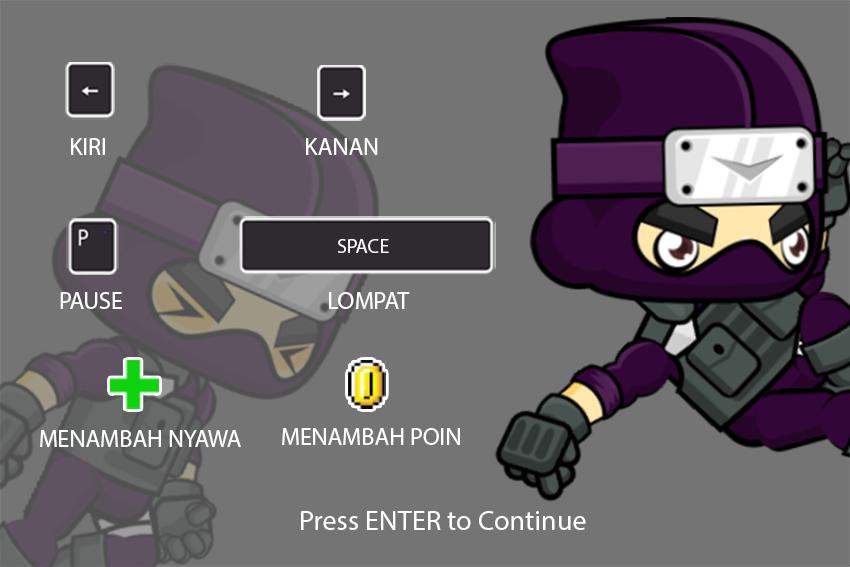
<style>
.page{position:relative;width:850px;height:567px;background:#747474}
.page>*{position:absolute;margin:0}
.t1{font:24.1px "MyriadPro-Regular";color:#ffffff}
.t2{font:20px "MyriadPro-Regular";color:#ffffff}
.t3{font:28.4px "MyriadPro-Regular";color:#ffffff}
</style>
<div class="page">
<p class="t1" style="left:71px;top:138px;width:34px;height:17px">KIRI</p>
<p class="t1" style="left:306px;top:138px;width:72px;height:17px">KANAN</p>
<p class="t2" style="left:338px;top:239px;width:51px;height:14px">SPACE</p>
<p class="t1" style="left:60px;top:292px;width:62px;height:17px">PAUSE</p>
<p class="t1" style="left:329px;top:292px;width:81px;height:17px">LOMPAT</p>
<p class="t1" style="left:40px;top:430px;width:201px;height:17px">MENAMBAH NYAWA</p>
<p class="t1" style="left:282px;top:428px;width:178px;height:17px">MENAMBAH POIN</p>
<p class="t3" style="left:301px;top:511px;width:285px;height:19px">Press ENTER to Continue</p>
</div>
